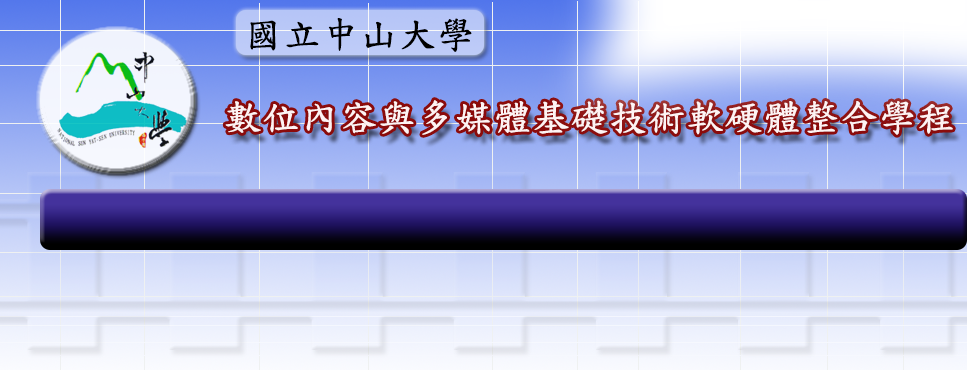
<style>
.page{position:relative;width:967px;height:370px}
.page>*{position:absolute;margin:0}
.t1{font:37.1px "DFKaiShu-SB-Estd-BF";letter-spacing:0.01em;color:#000000;font-weight:bold}
.t2{font:37.3px "DFKaiShu-SB-Estd-BF";letter-spacing:0.01em;color:#fef3f3;font-weight:bold}
</style>
<div class="page">
<p class="t1" style="left:250px;top:18px;width:222px;height:34px">國立中山大學</p>
<p class="t2" style="left:225px;top:100px;width:728px;height:35px">數位內容與多媒體基礎技術軟硬體整合學程</p>
</div>
